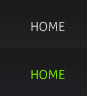
<style>
.page{position:relative;width:87px;height:96px}
.page>*{position:absolute;margin:0}
.t1{font:12.6px "Aller-Light";color:#ebe8d0}
.t2{font:12.6px "Aller-Light";color:#83f901}
</style>
<div class="page">
<p class="t1" style="left:31px;top:21px;width:34px;height:11px">HOME</p>
<p class="t2" style="left:31px;top:69px;width:34px;height:11px">HOME</p>
</div>
